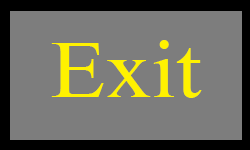
<style>
.page{position:relative;width:250px;height:150px;background:#7d7d7d}
.page>*{position:absolute;margin:0}
.t1{font:82px "TimesNewRomanPSMT";color:#fff200;scale:1.1 1}
</style>
<div class="page">
<p class="t1" style="left:51px;top:40px;width:151px;height:58px">Exit</p>
</div>
